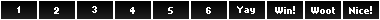
<style>
.page{position:relative;width:380px;height:20px;background:#ffffff}
.page>*{position:absolute;margin:0}
.t1{font:8px "Snakebold";color:#ffffff}
</style>
<div class="page">
<p class="t1" style="left:17px;top:6px;width:3px;height:7px">1</p>
<p class="t1" style="left:92px;top:6px;width:5px;height:7px">3</p>
<p class="t1" style="left:237px;top:6px;width:18px;height:8px">Yay</p>
<p class="t1" style="left:275px;top:6px;width:20px;height:8px">Win!</p>
<p class="t1" style="left:349px;top:6px;width:23px;height:8px">Nice!</p>
<p class="t1" style="left:54px;top:7px;width:5px;height:7px">2</p>
<p class="t1" style="left:130px;top:7px;width:5px;height:7px">4</p>
<p class="t1" style="left:168px;top:7px;width:5px;height:7px">5</p>
<p class="t1" style="left:206px;top:7px;width:5px;height:7px">6</p>
<p class="t1" style="left:311px;top:7px;width:24px;height:7px">Woot</p>
</div>
